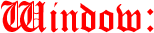
<style>
.page{position:relative;width:154px;height:33px;background:#ffffff}
.page>*{position:absolute;margin:0}
.t1{font:45px "CloisterBlack-Light";color:#ff0000}
</style>
<div class="page">
<p class="t1" style="left:1px;top:0px;width:153px;height:33px">Window:</p>
</div>
